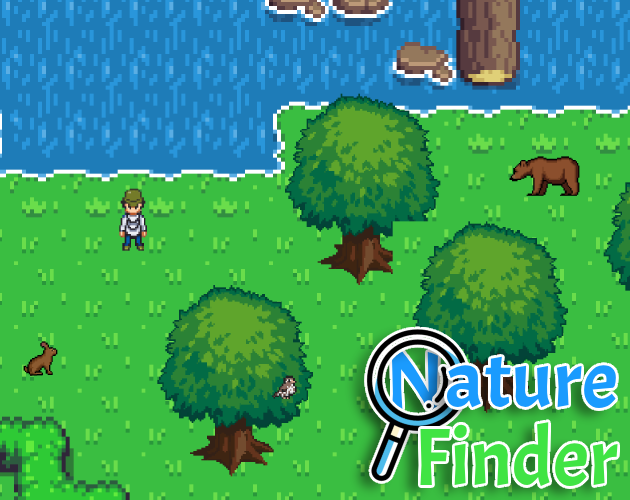
<style>
.page{position:relative;width:630px;height:500px;background:#3abe41}
.page>*{position:absolute;margin:0}
.t1{font:84px "Acme-Regular"}
.t2{font:81.2px/77.3px "Acme-Regular";color:#40e444}
.t3{font:81.2px/77.3px "Acme-Regular";color:#1a9bfe}
</style>
<div class="page">
<p class="t1" style="left:392px;top:351px;width:46px;height:64px">N</p>
<p class="t2" style="left:420px;top:356px;width:198px;height:130px;text-align:right"><span class="t3">ature<br></span>Finder</p>
</div>
